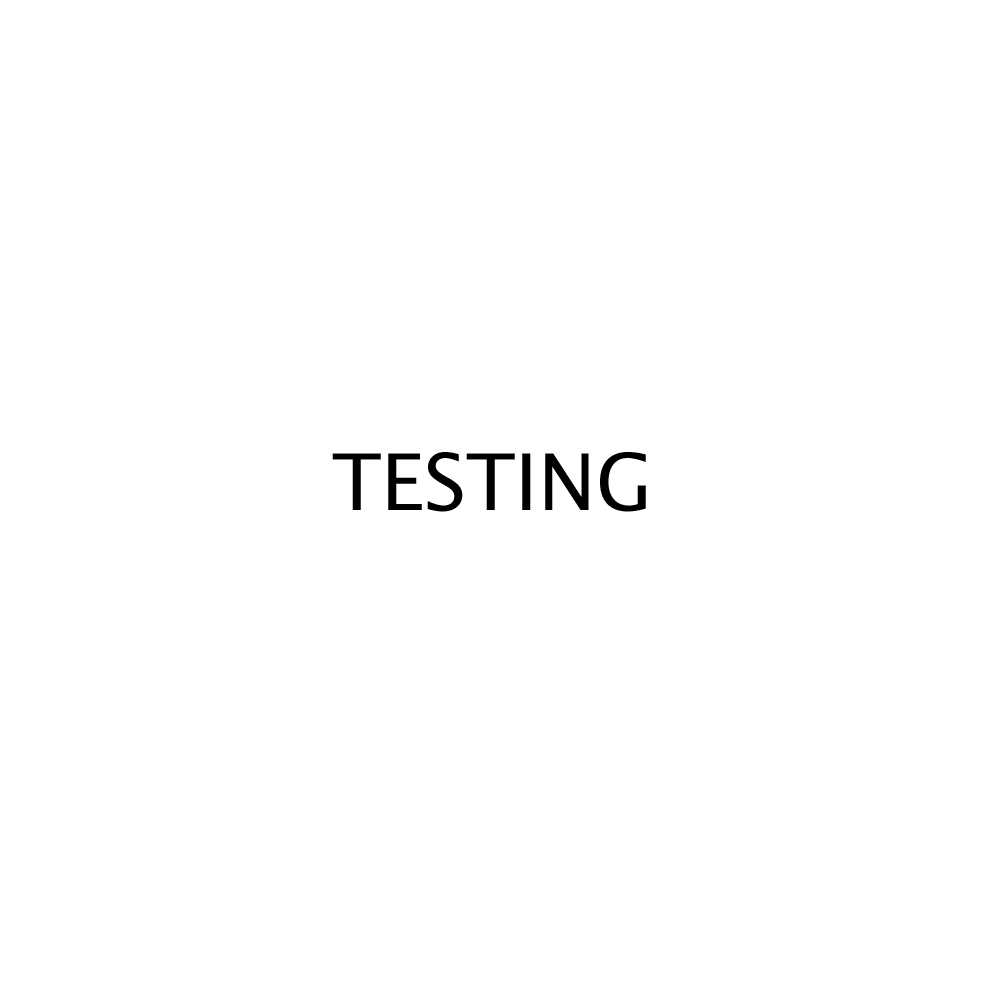
<style>
.page{position:relative;width:1000px;height:1000px;background:#ffffff}
.page>*{position:absolute;margin:0}
.t1{font:78.1px "LucidaGrande";color:#000000}
</style>
<div class="page">
<p class="t1" style="left:332px;top:452px;width:314px;height:60px">TESTING</p>
</div>
